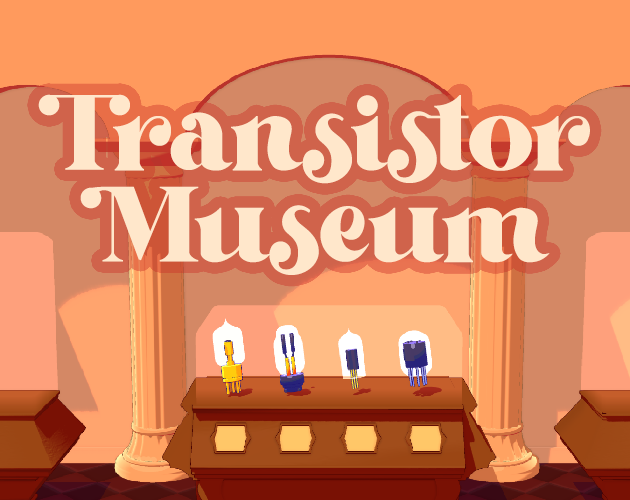
<style>
.page{position:relative;width:630px;height:500px}
.page>*{position:absolute;margin:0}
.t1{font:107.4px/91.8px "BeachflyFreeTrial";color:#ffe7cb}
</style>
<div class="page">
<p class="t1" style="left:38px;top:94px;width:552px;height:181px;text-align:center">Transistor<br>Museum</p>
</div>
